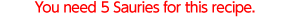
<style>
.page{position:relative;width:290px;height:17px;background:#ffffff}
.page>*{position:absolute;margin:0}
.t1{font:14px "UDShinGoPro-Medium";letter-spacing:-0.04em;color:#ff0000}
</style>
<div class="page">
<p class="t1" style="left:34px;top:0px;width:221px;height:17px">You need 5 Sauries for this recipe.</p>
</div>
